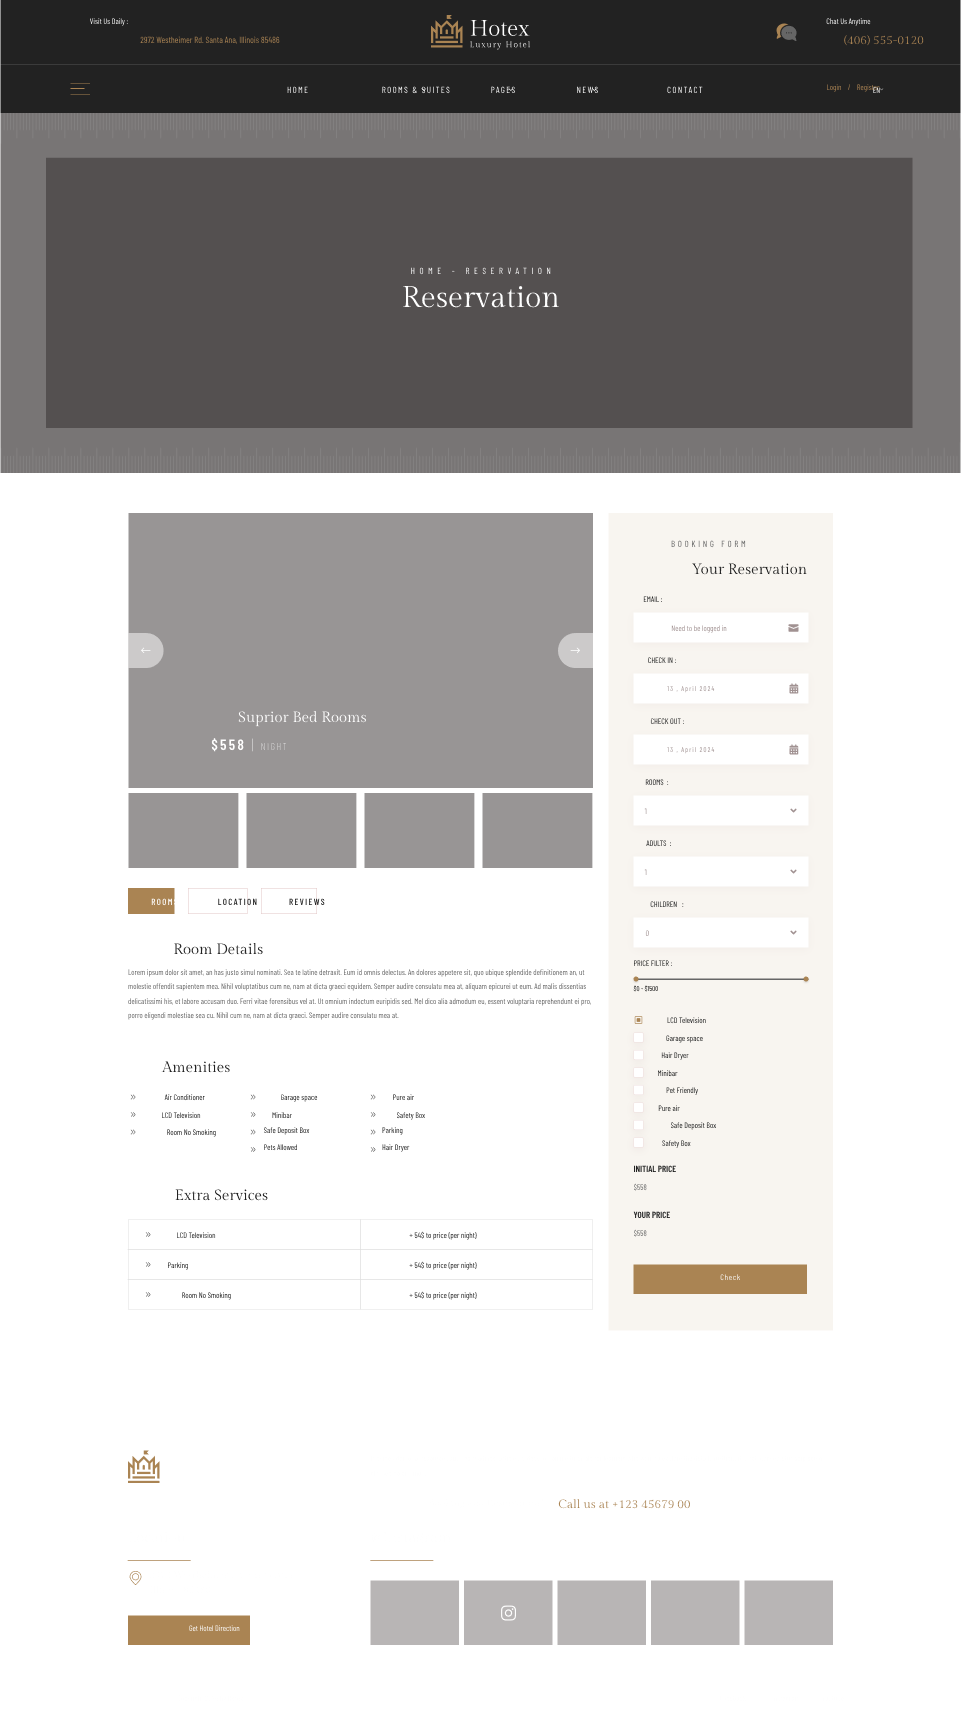
<style>
.page{position:relative;width:961px;height:1726px;background:#ffffff}
.page>*{position:absolute;margin:0}
.t1{font:8px "BarlowCondensed-Regular"}
.t2{font:9px "BarlowCondensed-Regular";color:#aa8453}
.t3{font:12px "GildaDisplay-Regular";color:#aa8453}
.t4{font:9px "BarlowCondensed-Regular";letter-spacing:0.15em;text-transform:uppercase}
.t5{font:9px "BarlowCondensed-Regular";letter-spacing:0.5em;color:#ffffff;text-transform:uppercase}
.t6{font:30px "GildaDisplay-Regular";color:#ffffff}
.t7{font:9px "BarlowCondensed-Regular";letter-spacing:0.3em;text-transform:uppercase}
.t8{font:15px "GildaDisplay-Regular";color:#222222}
.t9{font:8px "BarlowCondensed-Regular";color:#222222;text-transform:uppercase}
.t10{font:8px "BarlowCondensed-Regular";color:#a19292}
.t11{font:8px "BarlowCondensed-Regular";text-transform:uppercase}
.t12{font:7px "BarlowCondensed-Regular";letter-spacing:0.15em}
.t13{font:15px "GildaDisplay-Regular";color:#ffffff}
.t14{font:10px "BarlowCondensed-Thin";letter-spacing:0.15em;color:#ffffff;text-transform:uppercase}
.t15{font:15px "BarlowCondensed-SemiBold";letter-spacing:0.15em;color:#ffffff;text-transform:uppercase}
.t16{font:15px "BarlowCondensed-Thin";letter-spacing:0.15em;color:#ffffff;text-transform:uppercase}
.t17{font:9px "BarlowCondensed-Medium";letter-spacing:0.15em;color:#ffffff;text-transform:uppercase}
.t18{font:9px "BarlowCondensed-Medium";letter-spacing:0.15em;color:#222222;text-transform:uppercase}
.t19{font:8px/14.5px "BarlowCondensed-Regular";color:#666666}
.t20{font:7px "BarlowCondensed-Regular";text-transform:uppercase}
.t21{font:9px "BarlowCondensed-SemiBold";color:#222222;text-transform:uppercase}
.t22{font:8px "BarlowCondensed-Regular";letter-spacing:0.1em}
</style>
<div class="page">
<p class="t1" style="left:90px;top:18px;width:38px;height:8px">Visit Us Daily :</p>
<p class="t1" style="left:826px;top:18px;width:45px;height:8px">Chat Us Anytime</p>
<p class="t2" style="left:140px;top:36px;width:140px;height:8px">2972 Westheimer Rd. Santa Ana, Illinois 85486</p>
<p class="t3" style="left:844px;top:35px;width:80px;height:11px">(406) 555-0120</p>
<p class="t4" style="left:287px;top:86px;width:21px;height:8px">Home</p>
<p class="t4" style="left:382px;top:86px;width:68px;height:8px">Rooms &amp; Suites</p>
<p class="t4" style="left:491px;top:86px;width:24px;height:8px">Pages</p>
<p class="t4" style="left:577px;top:86px;width:21px;height:8px">News</p>
<p class="t4" style="left:667px;top:86px;width:36px;height:8px">Contact</p>
<p class="t1" style="left:827px;top:84px;width:53px;height:8px">Login    /    Register</p>
<p class="t1" style="left:873px;top:87px;width:7px;height:6px">EN</p>
<p class="t5" style="left:411px;top:267px;width:140px;height:8px">Home - Reservation</p>
<p class="t6" style="left:403px;top:286px;width:157px;height:22px">Reservation</p>
<p class="t7" style="left:671px;top:540px;width:75px;height:8px">Booking Form</p>
<p class="t8" style="left:691px;top:563px;width:116px;height:12px">Your Reservation</p>
<p class="t9" style="left:643px;top:596px;width:19px;height:6px">Email :</p>
<p class="t10" style="left:671px;top:625px;width:56px;height:8px">Need to be logged in</p>
<p class="t11" style="left:648px;top:657px;width:28px;height:7px">Check in :</p>
<p class="t12" style="left:667px;top:686px;width:48px;height:7px">13 , April 2024</p>
<p class="t13" style="left:238px;top:710px;width:129px;height:17px">Suprior Bed Rooms</p>
<p class="t11" style="left:650px;top:718px;width:34px;height:7px">Check Out :</p>
<p class="t14" style="left:211px;top:738px;width:76px;height:14px"><span class="t15">$558 </span><span class="t16">| </span>Night</p>
<p class="t12" style="left:667px;top:747px;width:48px;height:7px">13 , April 2024</p>
<p class="t11" style="left:645px;top:779px;width:24px;height:7px">Rooms  :</p>
<p class="t1" style="left:644px;top:808px;width:3px;height:6px">1</p>
<p class="t11" style="left:646px;top:840px;width:25px;height:7px">adults  :</p>
<p class="t1" style="left:644px;top:869px;width:3px;height:6px">1</p>
<p class="t17" style="left:151px;top:898px;width:27px;height:8px">Rooms</p>
<p class="t18" style="left:218px;top:898px;width:39px;height:8px">Location</p>
<p class="t18" style="left:289px;top:898px;width:36px;height:8px">Reviews</p>
<p class="t11" style="left:650px;top:901px;width:34px;height:7px">Children   :</p>
<p class="t8" style="left:174px;top:942px;width:89px;height:13px">Room Details</p>
<p class="t1" style="left:645px;top:930px;width:4px;height:7px">0</p>
<p class="t11" style="left:634px;top:960px;width:38px;height:7px">Price filter :</p>
<p class="t19" style="left:128px;top:969px;width:463px;height:51px">Lorem ipsum dolor sit amet, an has justo simul nominati. Sea te latine detraxit. Eum id omnis delectus. An dolores appetere sit, quo ubique splendide definitionem an, ut molestie offendit sapientem mea. Nihil voluptatibus cum ne, nam at dicta graeci equidem. Semper audire consulatu mea at, aliquam epicurei ut eum. Ad malis dissentias delicatissimi his, et labore accusam duo. Ferri vitae forensibus vel at. Ut omnium indoctum euripidis sed. Mel dico alia admodum eu, essent voluptaria reprehendunt ei pro, porro eligendi molestiae sea cu. Nihil cum ne, nam at dicta graeci. Semper audire consulatu mea at.</p>
<p class="t20" style="left:633px;top:985px;width:25px;height:7px">$0 - $1500</p>
<p class="t1" style="left:667px;top:1017px;width:39px;height:7px">LCD Television</p>
<p class="t1" style="left:666px;top:1035px;width:37px;height:8px">Garage space</p>
<p class="t8" style="left:161px;top:1061px;width:69px;height:12px">Amenities</p>
<p class="t1" style="left:661px;top:1052px;width:28px;height:8px">Hair Dryer</p>
<p class="t1" style="left:658px;top:1070px;width:20px;height:7px">Minibar</p>
<p class="t1" style="left:164px;top:1094px;width:41px;height:7px">Air Conditioner</p>
<p class="t1" style="left:280px;top:1094px;width:38px;height:8px">Garage space</p>
<p class="t1" style="left:393px;top:1094px;width:22px;height:7px">Pure air</p>
<p class="t1" style="left:666px;top:1087px;width:32px;height:8px">Pet Friendly</p>
<p class="t1" style="left:658px;top:1105px;width:22px;height:7px">Pure air</p>
<p class="t1" style="left:162px;top:1112px;width:39px;height:7px">LCD Television</p>
<p class="t1" style="left:272px;top:1112px;width:20px;height:7px">Minibar</p>
<p class="t1" style="left:396px;top:1112px;width:29px;height:8px">Safety Box</p>
<p class="t1" style="left:167px;top:1129px;width:49px;height:8px">Room No Smoking</p>
<p class="t1" style="left:263px;top:1127px;width:47px;height:8px">Safe Deposit Box</p>
<p class="t1" style="left:382px;top:1127px;width:21px;height:8px">Parking</p>
<p class="t1" style="left:670px;top:1122px;width:47px;height:8px">Safe Deposit Box</p>
<p class="t1" style="left:264px;top:1144px;width:33px;height:7px">Pets Allowed</p>
<p class="t1" style="left:382px;top:1144px;width:28px;height:8px">Hair Dryer</p>
<p class="t1" style="left:662px;top:1140px;width:29px;height:8px">Safety Box</p>
<p class="t21" style="left:633px;top:1165px;width:43px;height:8px">Initial Price</p>
<p class="t8" style="left:175px;top:1189px;width:93px;height:12px">Extra Services</p>
<p class="t1" style="left:633px;top:1183px;width:14px;height:8px">$558</p>
<p class="t21" style="left:633px;top:1211px;width:37px;height:8px">Your Price</p>
<p class="t1" style="left:633px;top:1229px;width:14px;height:8px">$558</p>
<p class="t1" style="left:177px;top:1232px;width:39px;height:7px">LCD Television</p>
<p class="t1" style="left:409px;top:1231px;width:68px;height:9px">+ 54$ to price (per night)</p>
<p class="t1" style="left:168px;top:1262px;width:20px;height:8px">Parking</p>
<p class="t1" style="left:409px;top:1261px;width:68px;height:9px">+ 54$ to price (per night)</p>
<p class="t22" style="left:720px;top:1274px;width:20px;height:7px">Check</p>
<p class="t1" style="left:182px;top:1292px;width:49px;height:8px">Room No Smoking</p>
<p class="t1" style="left:409px;top:1291px;width:68px;height:9px">+ 54$ to price (per night)</p>
<p class="t3" style="left:558px;top:1499px;width:132px;height:10px">Call us at +123 45679 00</p>
<p class="t1" style="left:189px;top:1625px;width:51px;height:7px">Get Hotel Direction</p>
</div>
